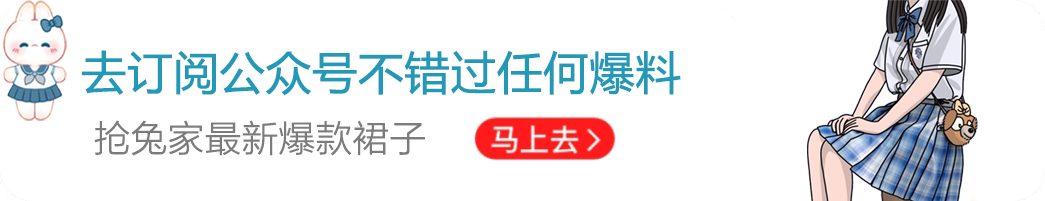
<style>
.page{position:relative;width:1045px;height:201px;background:#ffffff}
.page>*{position:absolute;margin:0}
.t1{font:45px "MicrosoftYaHei";color:#2399b8;font-weight:bold}
.t2{font:36px "MicrosoftYaHeiLight";color:#7c7c7c;font-weight:bold}
</style>
<div class="page">
<p class="t1" style="left:82px;top:50px;width:599px;height:46px">去订阅公众号不错过任何爆料</p>
<p class="t2" style="left:94px;top:120px;width:331px;height:36px">抢兔家最新爆款裙子</p>
</div>
